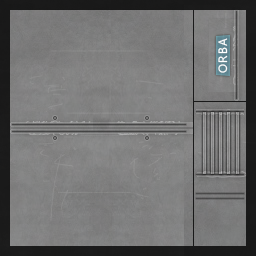
<style>
.page{position:relative;width:256px;height:256px}
.page>*{position:absolute;margin:0}
.t1{font:12px "SegoeUI";letter-spacing:0.1em;color:#ffffff}
</style>
<div class="page">
<p class="t1" style="left:218px;top:38px;width:10px;height:35px;rotate:-90deg">ORBA</p>
</div>
